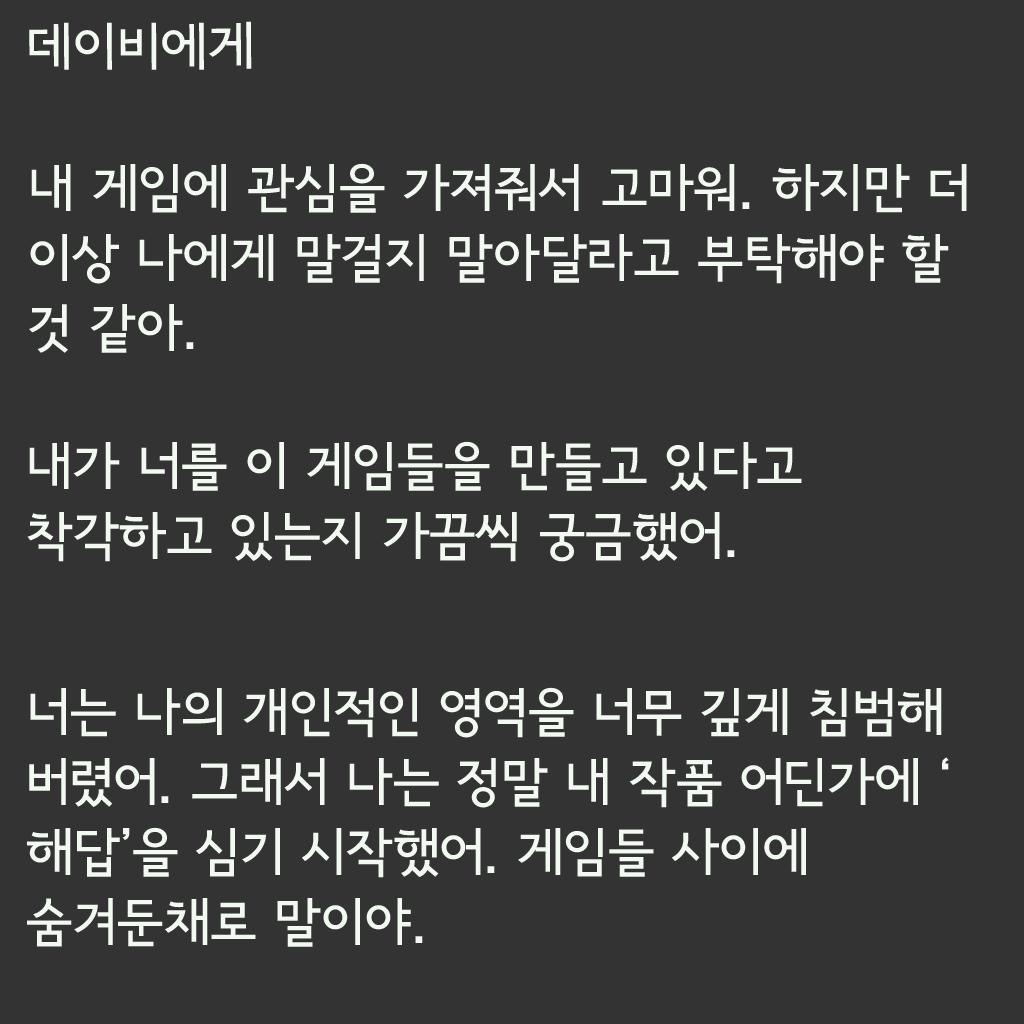
<style>
.page{position:relative;width:1024px;height:1024px;background:#333333}
.page>*{position:absolute;margin:0}
.t1{font:52px "SeoulNamsanB";color:#f1f9f1}
.t2{font:52px/70px "SeoulNamsanB";color:#f1f9f1}
</style>
<div class="page">
<p class="t1" style="left:29px;top:21px;width:223px;height:49px">데이비에게</p>
<p class="t2" style="left:29px;top:163px;width:938px;height:190px">내 게임에 관심을 가져줘서 고마워. 하지만 더 이상 나에게 말걸지 말아달라고 부탁해야 할 것 같아.</p>
<p class="t2" style="left:27px;top:441px;width:775px;height:121px">내가 너를 이 게임들을 만들고 있다고 착각하고 있는지 가끔씩 궁금했어.</p>
<p class="t2" style="left:27px;top:687px;width:922px;height:260px">너는 나의 개인적인 영역을 너무 깊게 침범해 버렸어. 그래서 나는 정말 내 작품 어딘가에 ‘해답’을 심기 시작했어. 게임들 사이에 숨겨둔채로 말이야.</p>
</div>
